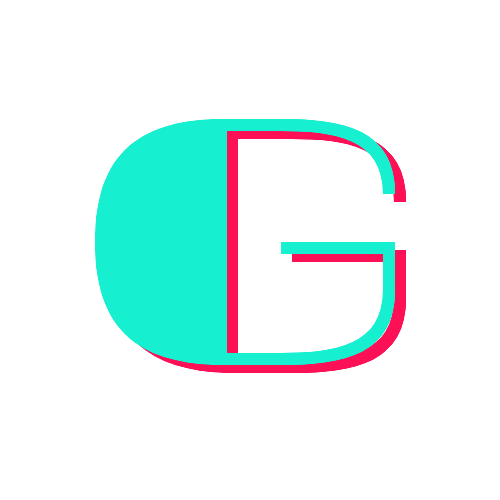
<style>
.page{position:relative;width:500px;height:500px;background:#ffffff}
.page>*{position:absolute;margin:0}
.t1{font:300px "20db";color:#16f0d1}
</style>
<div class="page">
<p class="t1" style="left:95px;top:118px;width:300px;height:247px">G</p>
<p class="t1" style="left:106px;top:126px;width:300px;height:247px">G</p>
</div>
